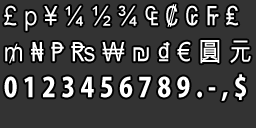
<style>
.page{position:relative;width:256px;height:128px;background:#333333}
.page>*{position:absolute;margin:0}
.t1{font:27px/36px "ArialUnicodeMS";letter-spacing:0.26em;color:#ffffff;scale:0.88 1}
.t2{font:27px/36px "KozGoPro-Heavy";letter-spacing:0.2em;color:#ffffff;scale:0.88 1}
.t3{font:27px/36px "KozGoPro-Heavy";letter-spacing:0.26em;color:#ffffff;scale:0.88 1}
</style>
<div class="page">
<p class="t1" style="left:4px;top:4px;width:247px;height:97px">£p¥¼½¾₠₡₢₣₤<br>₥₦₧₨₩₪₫€圓元<br><span class="t2">0123456789.-,</span><span class="t3">$</span></p>
</div>
